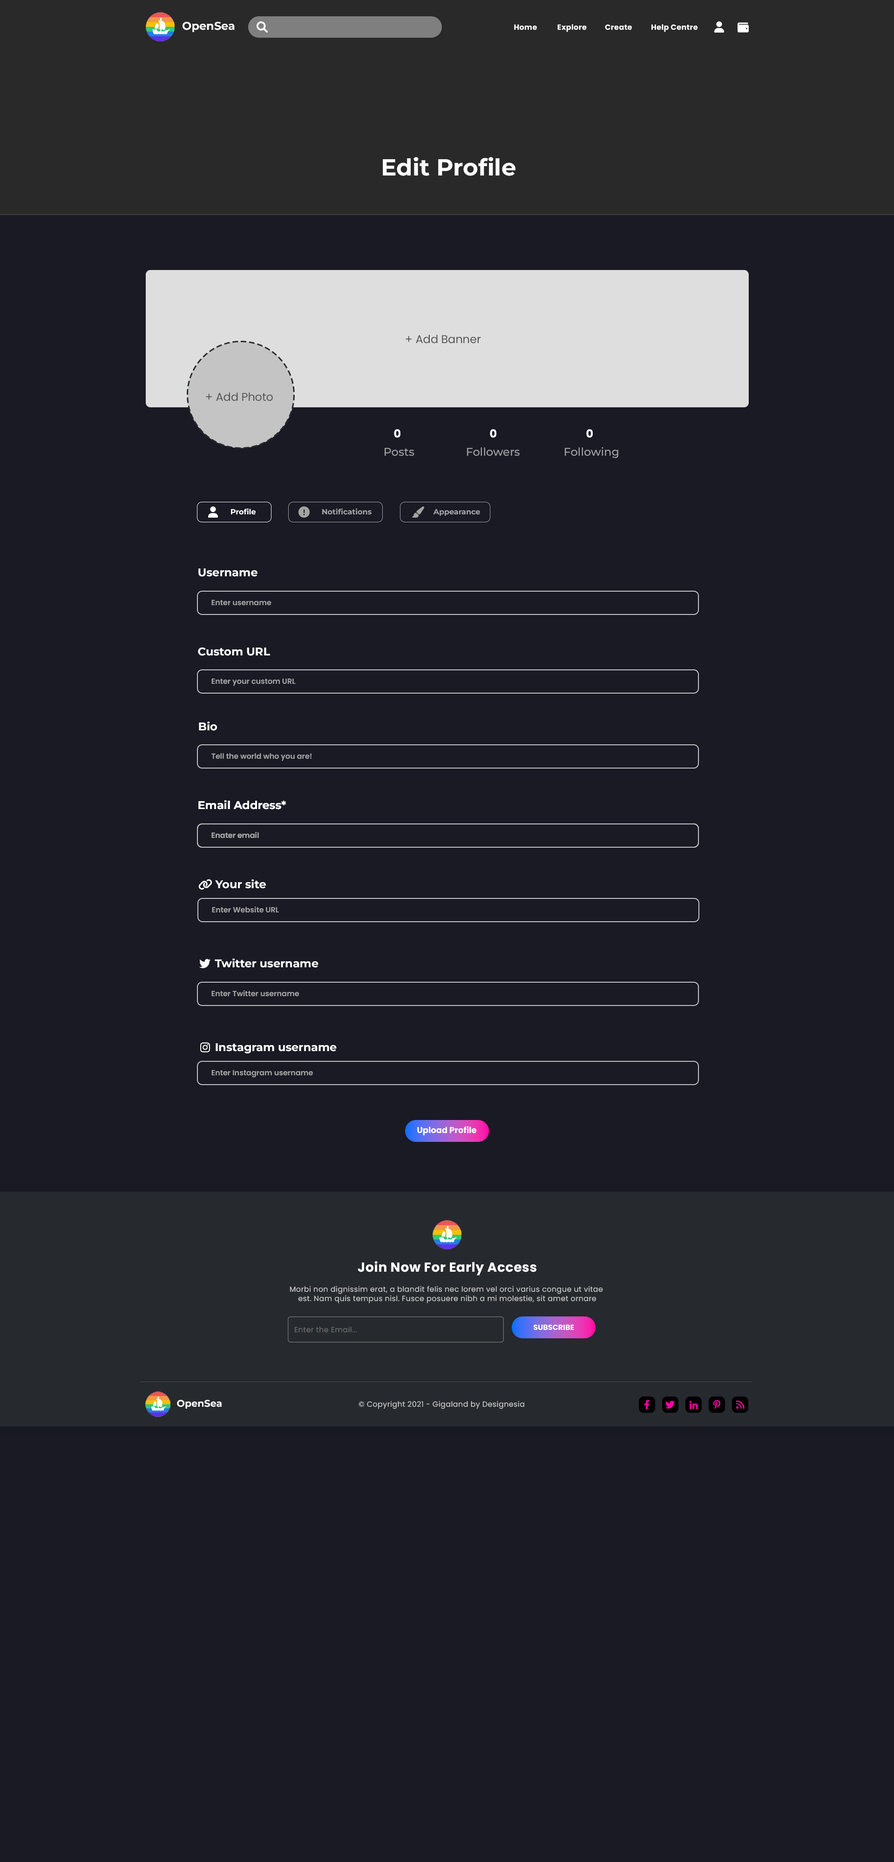
<style>
.page{position:relative;width:894px;height:1862px;background:#1a1a25}
.page>*{position:absolute;margin:0}
.t1{font:11.2px "Montserrat-Bold";color:#ffffff}
.t2{font:7.4px "Poppins-Bold";letter-spacing:0.025em;color:#ffffff}
.t3{font:23.3px "Montserrat-Bold";color:#fefefe}
.t4{font:11.2px "Poppins-Regular";color:#545454}
.t5{font:11.2px "Poppins-Bold";color:#ffffff}
.t6{font:11.2px "Montserrat-Medium";color:#9ea0a2}
.t7{font:7.4px "Montserrat-Bold";color:#ffffff}
.t8{font:7.4px "Montserrat-Bold";color:#a4a4a4}
.t9{font:7.4px "Poppins-SemiBold";color:#a5a5a5}
.t10{font:8.4px "Poppins-Bold";color:#ffffff}
.t11{font:13px "Poppins-Bold";letter-spacing:0.025em;color:#ffffff}
.t12{font:7.4px "Poppins-Regular";letter-spacing:0.025em;color:#cccccc}
.t13{font:7.4px "Poppins-Bold";color:#ffffff}
.t14{font:7.4px "Poppins-Regular";letter-spacing:0.025em;color:#6d6d6d}
.t15{font:9.6px "Montserrat-Bold";color:#ffffff}
</style>
<div class="page">
<p class="t1" style="left:182px;top:22px;width:53px;height:10px">OpenSea</p>
<p class="t2" style="left:514px;top:24px;width:23px;height:6px">Home</p>
<p class="t2" style="left:557px;top:24px;width:30px;height:8px">Explore</p>
<p class="t2" style="left:605px;top:24px;width:27px;height:6px">Create</p>
<p class="t2" style="left:651px;top:24px;width:47px;height:8px">Help Centre</p>
<p class="t3" style="left:383px;top:157px;width:132px;height:19px">Edit Profile</p>
<p class="t4" style="left:406px;top:335px;width:75px;height:9px">+ Add Banner</p>
<p class="t4" style="left:206px;top:392px;width:67px;height:9px">+ Add Photo</p>
<p class="t5" style="left:394px;top:429px;width:6px;height:9px">0</p>
<p class="t5" style="left:490px;top:429px;width:6px;height:9px">0</p>
<p class="t5" style="left:586px;top:429px;width:7px;height:9px">0</p>
<p class="t6" style="left:385px;top:448px;width:29px;height:8px">Posts</p>
<p class="t6" style="left:467px;top:447px;width:53px;height:9px">Followers</p>
<p class="t6" style="left:565px;top:447px;width:53px;height:11px">Following</p>
<p class="t7" style="left:231px;top:508px;width:25px;height:7px">Profile</p>
<p class="t8" style="left:322px;top:508px;width:50px;height:7px">Notifications</p>
<p class="t8" style="left:433px;top:509px;width:47px;height:7px">Appearance</p>
<p class="t1" style="left:198px;top:568px;width:59px;height:9px">Username</p>
<p class="t9" style="left:211px;top:600px;width:60px;height:6px">Enter username</p>
<p class="t1" style="left:198px;top:648px;width:72px;height:8px">Custom URL</p>
<p class="t9" style="left:211px;top:678px;width:85px;height:8px">Enter your custom URL</p>
<p class="t1" style="left:199px;top:722px;width:18px;height:9px">Bio</p>
<p class="t9" style="left:211px;top:753px;width:100px;height:8px">Tell the world who you are!</p>
<p class="t1" style="left:198px;top:800px;width:88px;height:10px">Email Address*</p>
<p class="t1" style="left:198px;top:800px;width:88px;height:10px">Email Address*</p>
<p class="t9" style="left:211px;top:832px;width:48px;height:6px">Enater email</p>
<p class="t9" style="left:211px;top:832px;width:48px;height:6px">Enater email</p>
<p class="t1" style="left:215px;top:879px;width:51px;height:10px">Your site</p>
<p class="t9" style="left:212px;top:906px;width:67px;height:7px">Enter Website URL</p>
<p class="t1" style="left:215px;top:959px;width:103px;height:9px">Twitter username</p>
<p class="t9" style="left:211px;top:990px;width:88px;height:7px">Enter Twitter username</p>
<p class="t1" style="left:216px;top:1043px;width:121px;height:11px">Instagram username</p>
<p class="t9" style="left:211px;top:1070px;width:102px;height:8px">Enter Instagram username</p>
<p class="t10" style="left:417px;top:1126px;width:59px;height:9px">Upload Profile</p>
<p class="t11" style="left:358px;top:1261px;width:178px;height:15px">Join Now For Early Access</p>
<p class="t12" style="left:290px;top:1286px;width:313px;height:18px;text-align:center">Morbi non dignissim erat, a blandit felis nec lorem vel orci varius congue ut vitae <br>est. Nam quis tempus nisl. Fusce posuere nibh a mi molestie, sit amet ornare</p>
<p class="t13" style="left:534px;top:1325px;width:40px;height:5px">SUBSCRIBE</p>
<p class="t14" style="left:295px;top:1326px;width:62px;height:7px">Enter the Email...</p>
<p class="t15" style="left:177px;top:1400px;width:45px;height:9px">OpenSea</p>
<p class="t12" style="left:358px;top:1401px;width:166px;height:8px">© Copyright 2021 - Gigaland by Designesia</p>
</div>
